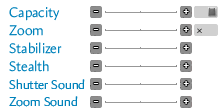
<style>
.page{position:relative;width:224px;height:112px;background:#ffffff}
.page>*{position:absolute;margin:0}
.t1{font:14px "Amira-Light";color:#0082bb}
.t2{font:12px "Amira-Light";color:#ffffff}
.t3{font:12.8px "Amira-Light";color:#0082bb}
</style>
<div class="page">
<p class="t1" style="left:9px;top:7px;width:51px;height:14px">Capacity</p>
<p class="t2" style="left:93px;top:11px;width:6px;height:1px">-</p>
<p class="t2" style="left:183px;top:9px;width:6px;height:5px">+</p>
<p class="t1" style="left:9px;top:25px;width:34px;height:11px">Zoom</p>
<p class="t2" style="left:93px;top:29px;width:6px;height:1px">-</p>
<p class="t2" style="left:183px;top:27px;width:6px;height:5px">+</p>
<p class="t1" style="left:9px;top:42px;width:53px;height:12px">Stabilizer</p>
<p class="t2" style="left:93px;top:47px;width:6px;height:1px">-</p>
<p class="t2" style="left:183px;top:45px;width:6px;height:5px">+</p>
<p class="t1" style="left:9px;top:60px;width:40px;height:12px">Stealth</p>
<p class="t2" style="left:93px;top:65px;width:6px;height:1px">-</p>
<p class="t2" style="left:183px;top:63px;width:6px;height:5px">+</p>
<p class="t3" style="left:9px;top:79px;width:76px;height:11px">Shutter Sound</p>
<p class="t2" style="left:93px;top:83px;width:6px;height:1px">-</p>
<p class="t2" style="left:183px;top:81px;width:6px;height:5px">+</p>
<p class="t3" style="left:9px;top:96px;width:69px;height:11px">Zoom Sound</p>
<p class="t2" style="left:93px;top:101px;width:6px;height:1px">-</p>
<p class="t2" style="left:183px;top:99px;width:6px;height:5px">+</p>
</div>
